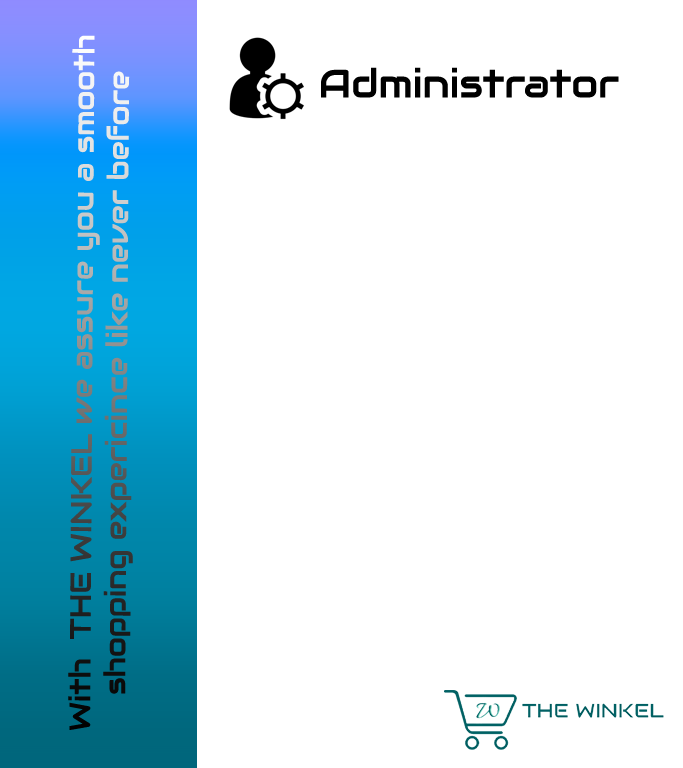
<style>
.page{position:relative;width:683px;height:768px;background:#ffffff}
.page>*{position:absolute;margin:0}
.t1{font:29px "Audiowide-Regular"}
.t2{font:39px "Audiowide-Regular";color:#000000}
</style>
<div class="page">
<p class="t1" style="left:68px;top:35px;width:65px;height:695px;rotate:-90deg">With  THE WINKEL we assure you a smooth shopping expericince like never before</p>
<p class="t2" style="left:321px;top:67px;width:298px;height:31px">Administrator</p>
</div>
